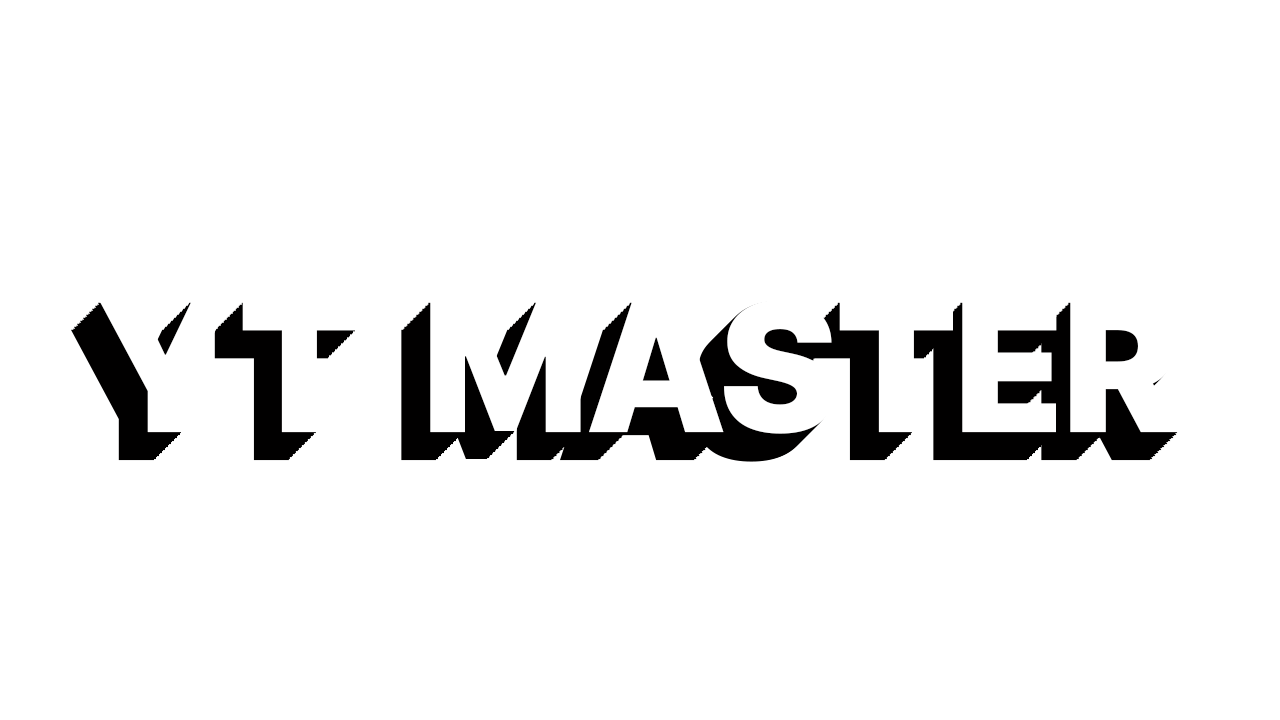
<style>
.page{position:relative;width:1280px;height:720px;background:#ffffff}
.page>*{position:absolute;margin:0}
.t1{font:179.2px "Inter-Black";letter-spacing:-0.02em;color:#ffffff}
.t2{font:179.2px "Inter-Black";letter-spacing:-0.02em;color:#010000}
.t3{font:179.2px "Inter-Black";letter-spacing:-0.02em}
</style>
<div class="page">
<p class="t1" style="left:95px;top:304px;width:1080px;height:134px">YT  MASTER</p>
<p class="t1" style="left:97px;top:303px;width:1080px;height:134px">YT  MASTER</p>
<p class="t1" style="left:98px;top:301px;width:1080px;height:134px">YT  MASTER</p>
<p class="t1" style="left:100px;top:300px;width:1080px;height:134px">YT  MASTER</p>
<p class="t2" style="left:71px;top:328px;width:1080px;height:134px">YT  MASTER</p>
<p class="t2" style="left:73px;top:327px;width:1080px;height:134px">YT  MASTER</p>
<p class="t3" style="left:74px;top:325px;width:1080px;height:134px">YT  MASTER</p>
<p class="t3" style="left:76px;top:324px;width:1080px;height:134px">YT  MASTER</p>
<p class="t3" style="left:77px;top:322px;width:1080px;height:134px">YT  MASTER</p>
<p class="t3" style="left:79px;top:321px;width:1080px;height:134px">YT  MASTER</p>
</div>
